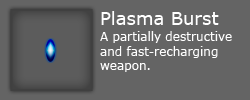
<style>
.page{position:relative;width:250px;height:100px;background:#646464}
.page>*{position:absolute;margin:0}
.t1{font:18px "Verdana";color:#ffffff}
.t2{font:12px "Verdana";color:#ffffff}
</style>
<div class="page">
<p class="t1" style="left:101px;top:11px;width:118px;height:14px">Plasma Burst</p>
<p class="t2" style="left:100px;top:31px;width:132px;height:41px">A partially destructive and fast-recharging weapon.</p>
</div>
